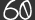
<style>
.page{position:relative;width:35px;height:20px;background:#333333}
.page>*{position:absolute;margin:0}
.t1{font:33.3px "Jerry'shandwriting";color:#ffffff}
</style>
<div class="page">
<p class="t1" style="left:3px;top:0px;width:29px;height:20px">60</p>
</div>
